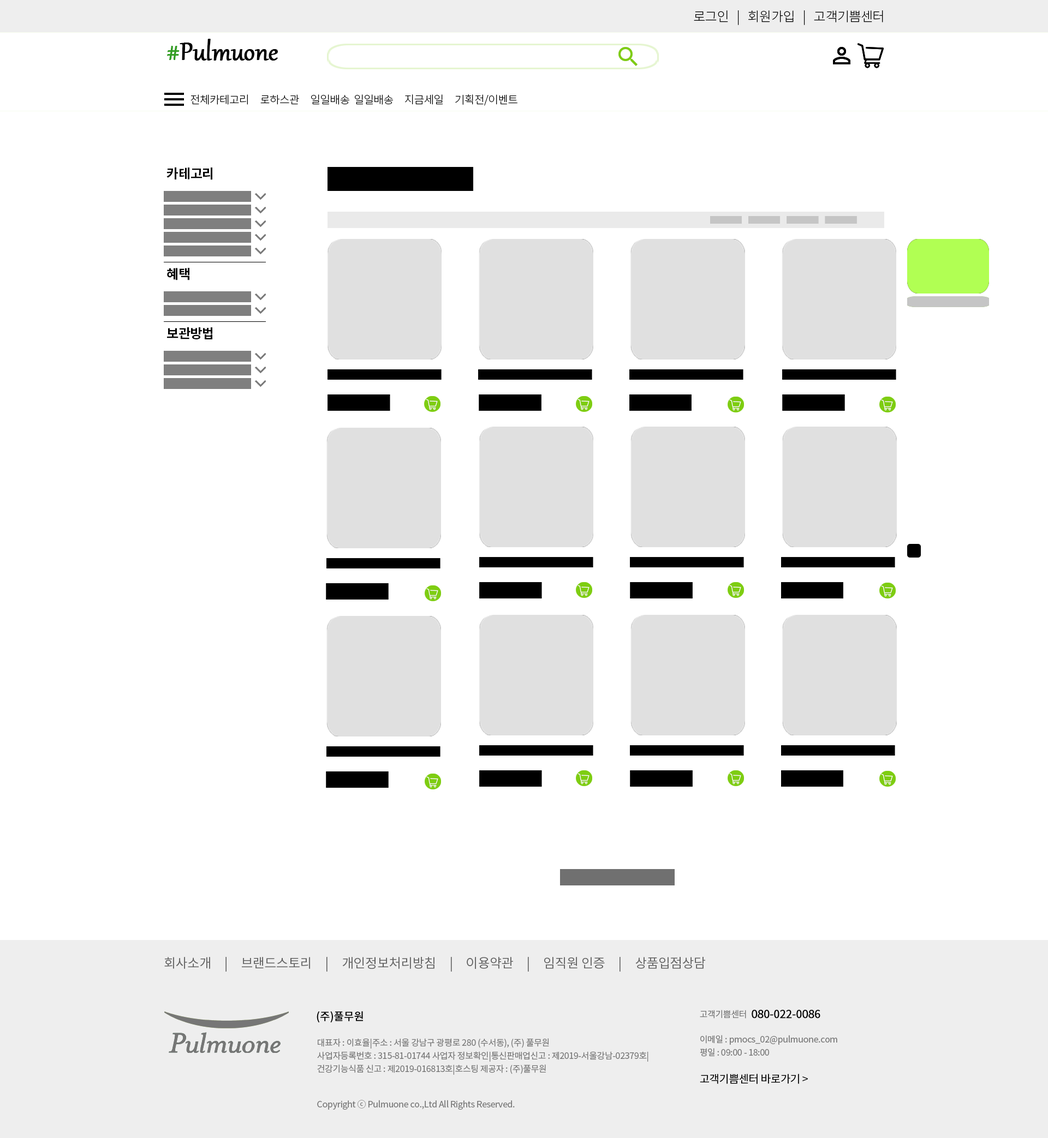
<style>
.page{position:relative;width:1048px;height:1138px;background:#ffffff}
.page>*{position:absolute;margin:0}
.t1{font:13.1px "NotoSansCJKkr-Light";letter-spacing:-0.02em;color:#000000}
.t2{font:30.6px "Gabriola";letter-spacing:-0.02em;color:#000000;font-weight:bold}
.t3{font:30.6px "Gabriola";letter-spacing:-0.02em;color:#339e23;font-weight:bold}
.t4{font:10.9px "NotoSansCJKkr-Light";letter-spacing:-0.02em;color:#000000}
.t5{font:13.1px "NotoSansCJKkr-Bold";letter-spacing:-0.02em;color:#000000}
.t6{font:13.1px "NotoSansCJKkr-Regular";letter-spacing:-0.02em;color:#616161}
.t7{font:8.7px "NotoSansCJKkr-Regular";letter-spacing:-0.02em;color:#767676}
.t8{font:10.9px "NotoSansCJKkr-Regular";letter-spacing:-0.02em;color:#000000;font-weight:bold}
.t9{font:8.7px/13.1px "NotoSansCJKkr-Regular";letter-spacing:-0.02em;color:#767676}
.t10{font:10.9px "NotoSansCJKkr-Regular";letter-spacing:-0.02em;color:#000000}
</style>
<div class="page">
<p class="t1" style="left:694px;top:10px;width:189px;height:15px">로그인   |   회원가입   |   고객기쁨센터</p>
<p class="t2" style="left:167px;top:39px;width:111px;height:22px"><span class="t3">#</span>Pulmuone</p>
<p class="t4" style="left:190px;top:94px;width:327px;height:12px">전체카테고리     로하스관     일일배송  일일배송     지금세일     기획전/이벤트</p>
<p class="t5" style="left:166px;top:167px;width:46px;height:13px">카테고리</p>
<p class="t5" style="left:167px;top:268px;width:22px;height:12px">혜택</p>
<p class="t5" style="left:167px;top:327px;width:45px;height:12px">보관방법</p>
<p class="t6" style="left:164px;top:957px;width:541px;height:15px">회사소개     |     브랜드스토리     |     개인정보처리방침     |     이용약관     |     임직원 인증     |     상품입점상담</p>
<p class="t7" style="left:700px;top:1010px;width:46px;height:9px">고객기쁨센터</p>
<p class="t8" style="left:751px;top:1010px;width:69px;height:9px">080-022-0086</p>
<p class="t9" style="left:700px;top:1035px;width:137px;height:22px">이메일 : pmocs_02@pulmuone.com평일 : 09:00 - 18:00</p>
<p class="t9" style="left:317px;top:1038px;width:331px;height:37px">대표자 : 이효율|주소 : 서울 강남구 광평로 280 (수서동), (주) 풀무원<br>사업자등록번호 : 315-81-01744 사업자 정보확인|통신판매업신고 : 제2019-서울강남-02379호|<br>건강기능식품 신고 : 제2019-016813호|호스팅 제공자 : (주)풀무원</p>
<p class="t10" style="left:700px;top:1074px;width:108px;height:10px">고객기쁨센터 바로가기 &gt;</p>
<p class="t7" style="left:317px;top:1100px;width:198px;height:10px">Copyright ⓒ Pulmuone co.,Ltd All Rights Reserved.</p>
</div>
